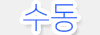
<style>
.page{position:relative;width:100px;height:35px;background:#f0f0f0}
.page>*{position:absolute;margin:0}
.t1{font:31px "NanumSquareL";color:#2462ff}
</style>
<div class="page">
<p class="t1" style="left:23px;top:3px;width:55px;height:29px">수동</p>
</div>
